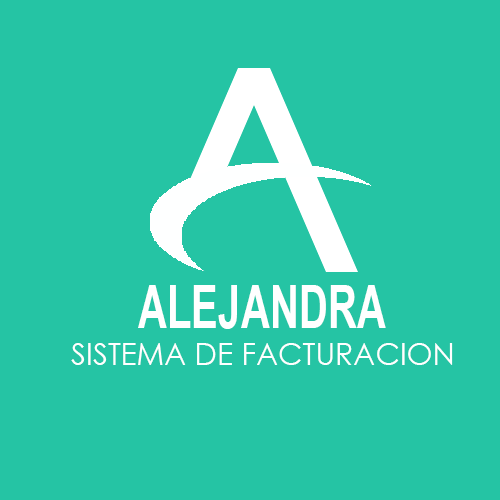
<style>
.page{position:relative;width:500px;height:500px;background:#25c4a4}
.page>*{position:absolute;margin:0}
.t1{font:60px "Arial-BoldMT";color:#ffffff;scale:0.67 1}
.t2{font:30px "CenturyGothic";color:#ffffff}
</style>
<div class="page">
<p class="t1" style="left:138px;top:285px;width:248px;height:44px">ALEJANDRA</p>
<p class="t2" style="left:71px;top:343px;width:382px;height:22px">SISTEMA DE FACTURACION</p>
</div>
